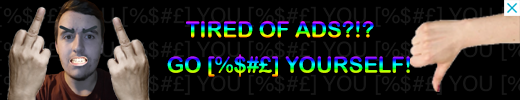
<style>
.page{position:relative;width:520px;height:100px;background:#000000}
.page>*{position:absolute;margin:0}
.t1{font:22px "ArialRoundedMTBold"}
</style>
<div class="page">
<p class="t1" style="left:186px;top:21px;width:188px;height:17px">TIRED OF ADS?!?</p>
<p class="t1" style="left:167px;top:54px;width:243px;height:23px">GO [%$#£] YOURSELF!</p>
</div>
